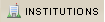
<style>
.page{position:relative;width:105px;height:22px;background:#d9d2c1}
.page>*{position:absolute;margin:0}
.t1{font:10px "ArialMT";letter-spacing:0.01em;color:#000000}
</style>
<div class="page">
<p class="t1" style="left:26px;top:8px;width:72px;height:7px">INSTITUTIONS</p>
</div>
